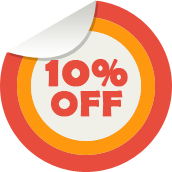
<style>
.page{position:relative;width:172px;height:172px;background:#e74c3c}
.page>*{position:absolute;margin:0}
.t1{font:45.4px/30px "BerlinSansFBDemi-Bold";color:#e74c3c;font-weight:bold}
.t2{font:37.2px/30px "BerlinSansFBDemi-Bold";color:#e74c3c;font-weight:bold}
</style>
<div class="page">
<p class="t1" style="left:45px;top:59px;width:83px;height:58px;text-align:center">10%<br><span class="t2">OFF</span></p>
</div>
